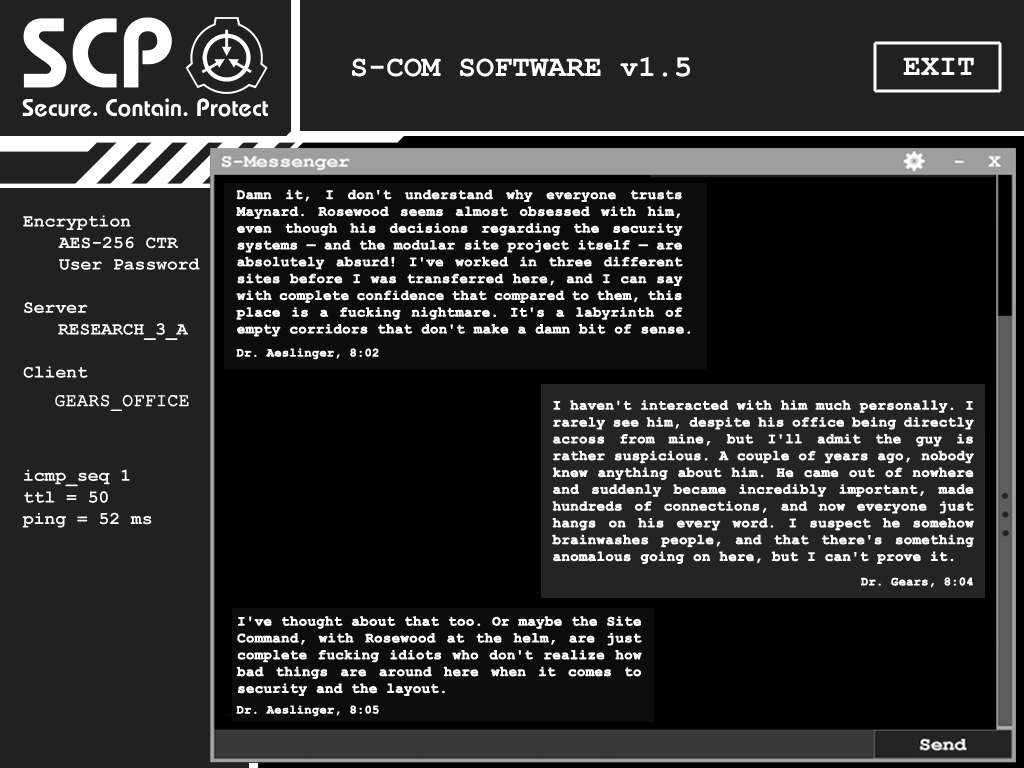
<style>
.page{position:relative;width:1024px;height:768px;background:#212121}
.page>*{position:absolute;margin:0}
.t1{font:14px "CourierNewPS-BoldMT";color:#ffffff;font-weight:bold}
.t2{font:12px "CourierNewPS-BoldMT";color:#ffffff;font-weight:bold}
.t3{font:18px "CourierNewPSMT";color:#ffffff;font-weight:bold}
</style>
<div class="page">
<p class="t1" style="left:236px;top:189px;width:455px;height:148px;text-align:justify">Damn it, I don't understand why everyone trusts Maynard. Rosewood seems almost obsessed with him, even though his decisions regarding the security systems — and the modular site project itself — are absolutely absurd! I've worked in three different sites before I was transferred here, and I can say with complete confidence that compared to them, this place is a fucking nightmare. It's a labyrinth of empty corridors that don't make a damn bit of sense.</p>
<p class="t2" style="left:236px;top:348px;width:143px;height:12px">Dr. Aeslinger, 8:02</p>
<p class="t3" style="left:55px;top:395px;width:134px;height:16px">GEARS_OFFICE</p>
<p class="t1" style="left:552px;top:400px;width:422px;height:164px;text-align:justify">I haven't interacted with him much personally. I rarely see him, despite his office being directly across from mine, but I'll admit the guy is rather suspicious. A couple of years ago, nobody knew anything about him. He came out of nowhere and suddenly became incredibly important, made hundreds of connections, and now everyone just hangs on his every word. I suspect he somehow brainwashes people, and that there's something anomalous going on here, but I can't prove it.</p>
<p class="t2" style="left:861px;top:577px;width:112px;height:11px">Dr. Gears, 8:04</p>
<p class="t1" style="left:236px;top:616px;width:406px;height:80px;text-align:justify">I've thought about that too. Or maybe the Site Command, with Rosewood at the helm, are just complete fucking idiots who don't realize how bad things are around here when it comes to security and the layout.</p>
<p class="t2" style="left:236px;top:705px;width:143px;height:12px">Dr. Aeslinger, 8:05</p>
</div>
